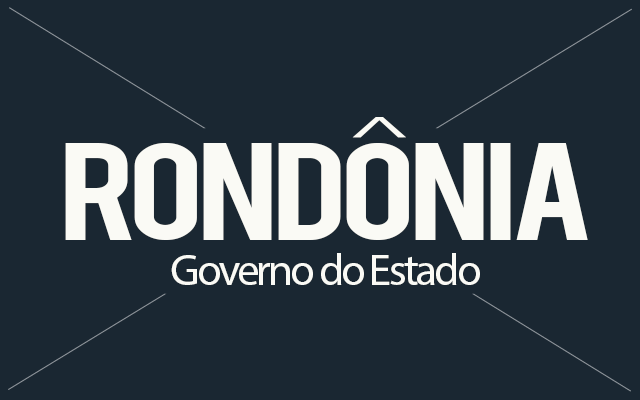
<style>
.page{position:relative;width:640px;height:400px;background:#1a2732}
.page>*{position:absolute;margin:0}
.t1{font:44.2px "MyriadPro-Regular";letter-spacing:-0.07em;color:#fafaf5;scale:2.54 1}
.t2{font:106.9px "Bebas";letter-spacing:-0.07em;color:#fafaf5;scale:1.36 1}
.t3{font:44.2px "MyriadPro-Regular";letter-spacing:-0.07em;color:#fafaf5;scale:1.03 1}
</style>
<div class="page">
<p class="t1" style="left:352px;top:117px;width:54px;height:21px">^</p>
<p class="t2" style="left:65px;top:143px;width:523px;height:97px">RONDONIA</p>
<p class="t3" style="left:171px;top:253px;width:309px;height:32px">Governo do Estado</p>
</div>
